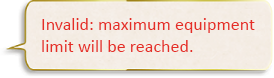
<style>
.page{position:relative;width:274px;height:78px}
.page>*{position:absolute;margin:0}
.t1{font:18px "Calibri";color:#e52e27}
</style>
<div class="page">
<p class="t1" style="left:42px;top:18px;width:213px;height:34px">Invalid: maximum equipment <br>limit will be reached.</p>
</div>
